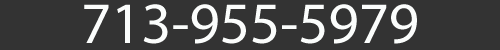
<style>
.page{position:relative;width:500px;height:50px;background:#333333}
.page>*{position:absolute;margin:0}
.t1{font:58.9px "MyriadPro-Regular";color:#fbfdfc}
</style>
<div class="page">
<p class="t1" style="left:84px;top:4px;width:333px;height:40px">713-955-5979</p>
</div>
